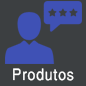
<style>
.page{position:relative;width:86px;height:86px;background:#3c3f41}
.page>*{position:absolute;margin:0}
.t1{font:15.6px "Helvetica-Normal";letter-spacing:0.06em;color:#ffffff;scale:0.89 1}
</style>
<div class="page">
<p class="t1" style="left:13px;top:68px;width:61px;height:13px">Produtos</p>
</div>
